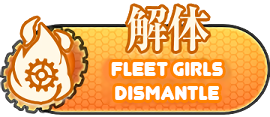
<style>
.page{position:relative;width:270px;height:117px;background:#ffffff}
.page>*{position:absolute;margin:0}
.t1{font:24px/24px "Junegull";color:#ffffff}
</style>
<div class="page">
<p class="t1" style="left:111px;top:62px;width:112px;height:38px;text-align:center">FLEET GIRLS<br>DISMANTLE</p>
</div>
